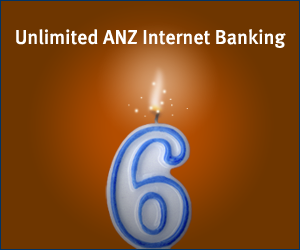
<style>
.page{position:relative;width:300px;height:250px;background:#6e3600}
.page>*{position:absolute;margin:0}
.t1{font:20px "MetaMediumLF-Roman";color:#ffffff}
</style>
<div class="page">
<p class="t1" style="left:16px;top:29px;width:270px;height:19px">Unlimited ANZ Internet Banking</p>
</div>
